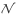
<style>
.page{position:relative;width:16px;height:16px;background:#ffffff}
.page>*{position:absolute;margin:0}
.t1{font:8px "Zapfino";color:#2c2c2c}
</style>
<div class="page">
<p class="t1" style="left:1px;top:2px;width:15px;height:12px">N</p>
</div>
